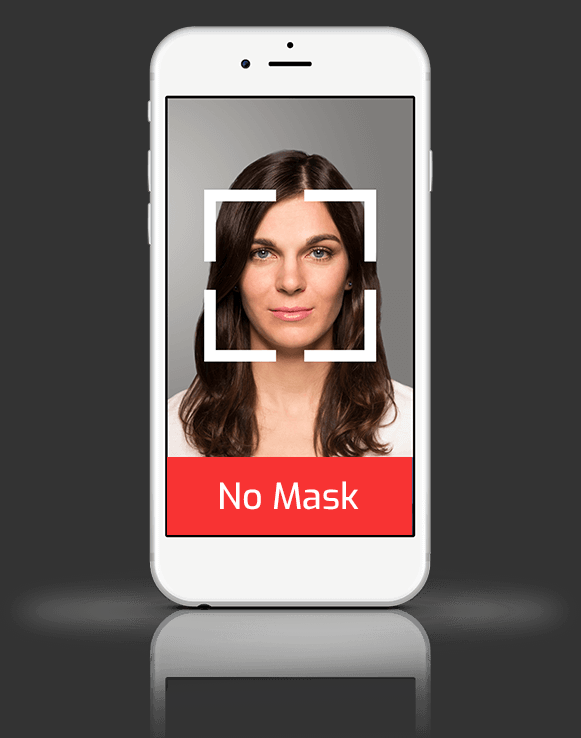
<style>
.page{position:relative;width:581px;height:738px;background:#333333}
.page>*{position:absolute;margin:0}
.t1{font:36px "Exo-Medium";color:#ffffff}
</style>
<div class="page">
<p class="t1" style="left:220px;top:481px;width:139px;height:29px">No Mask</p>
</div>
